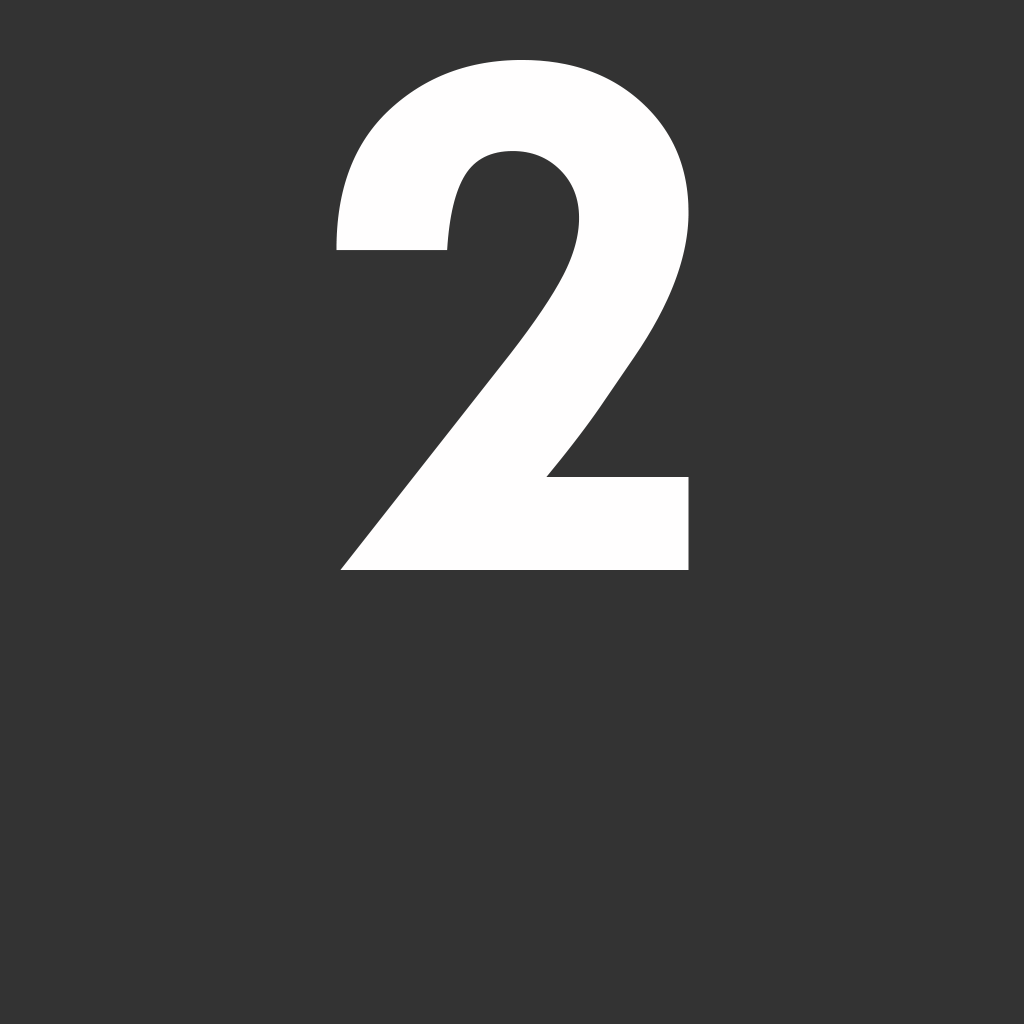
<style>
.page{position:relative;width:1024px;height:1024px;background:#333333}
.page>*{position:absolute;margin:0}
.t1{font:800px "TwCenMT-Bold";letter-spacing:0.05em;color:#fffefe}
</style>
<div class="page">
<p class="t1" style="left:336px;top:60px;width:353px;height:510px">2</p>
</div>
